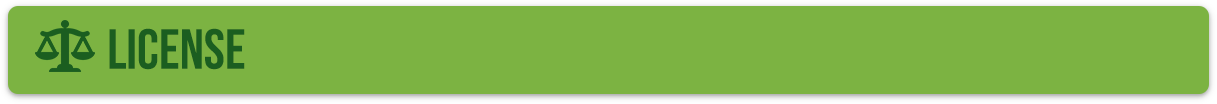
<style>
.page{position:relative;width:1217px;height:104px;background:#7cb342}
.page>*{position:absolute;margin:0}
.t1{font:56.6px "BebasNeueBold";color:#1b5e20}
</style>
<div class="page">
<p class="t1" style="left:109px;top:28px;width:136px;height:42px">license</p>
</div>
